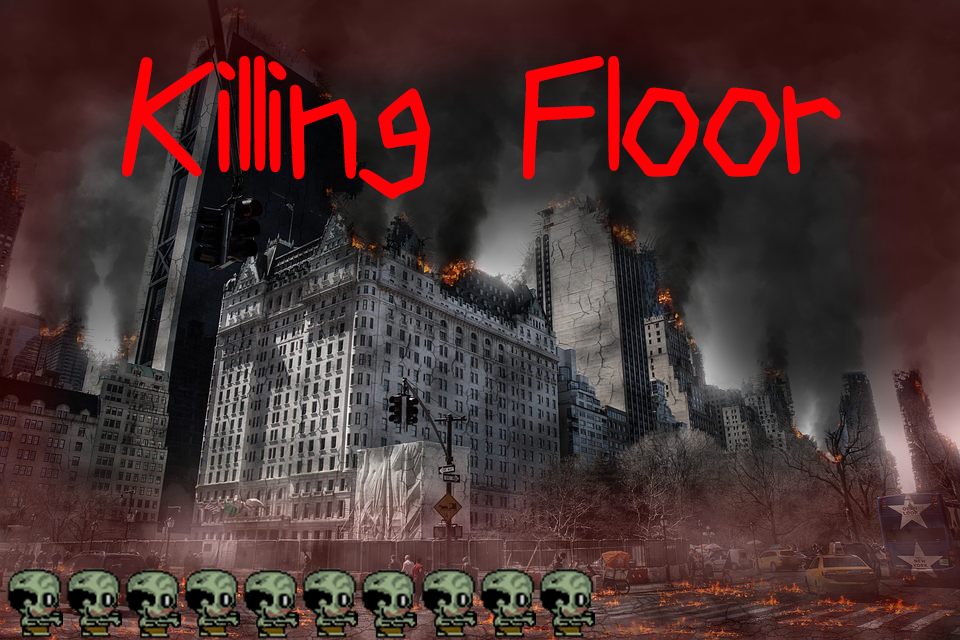
<style>
.page{position:relative;width:960px;height:640px}
.page>*{position:absolute;margin:0}
.t1{font:200px "CompHand";color:#ff0006;font-weight:bold}
</style>
<div class="page">
<p class="t1" style="left:122px;top:56px;width:719px;height:143px">Killing Floor</p>
</div>
